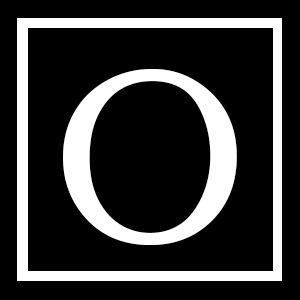
<style>
.page{position:relative;width:300px;height:300px;background:#000000}
.page>*{position:absolute;margin:0}
.t1{font:250px "BookmanOldStyle";color:#ffffff}
</style>
<div class="page">
<p class="t1" style="left:63px;top:69px;width:174px;height:176px">O</p>
</div>
